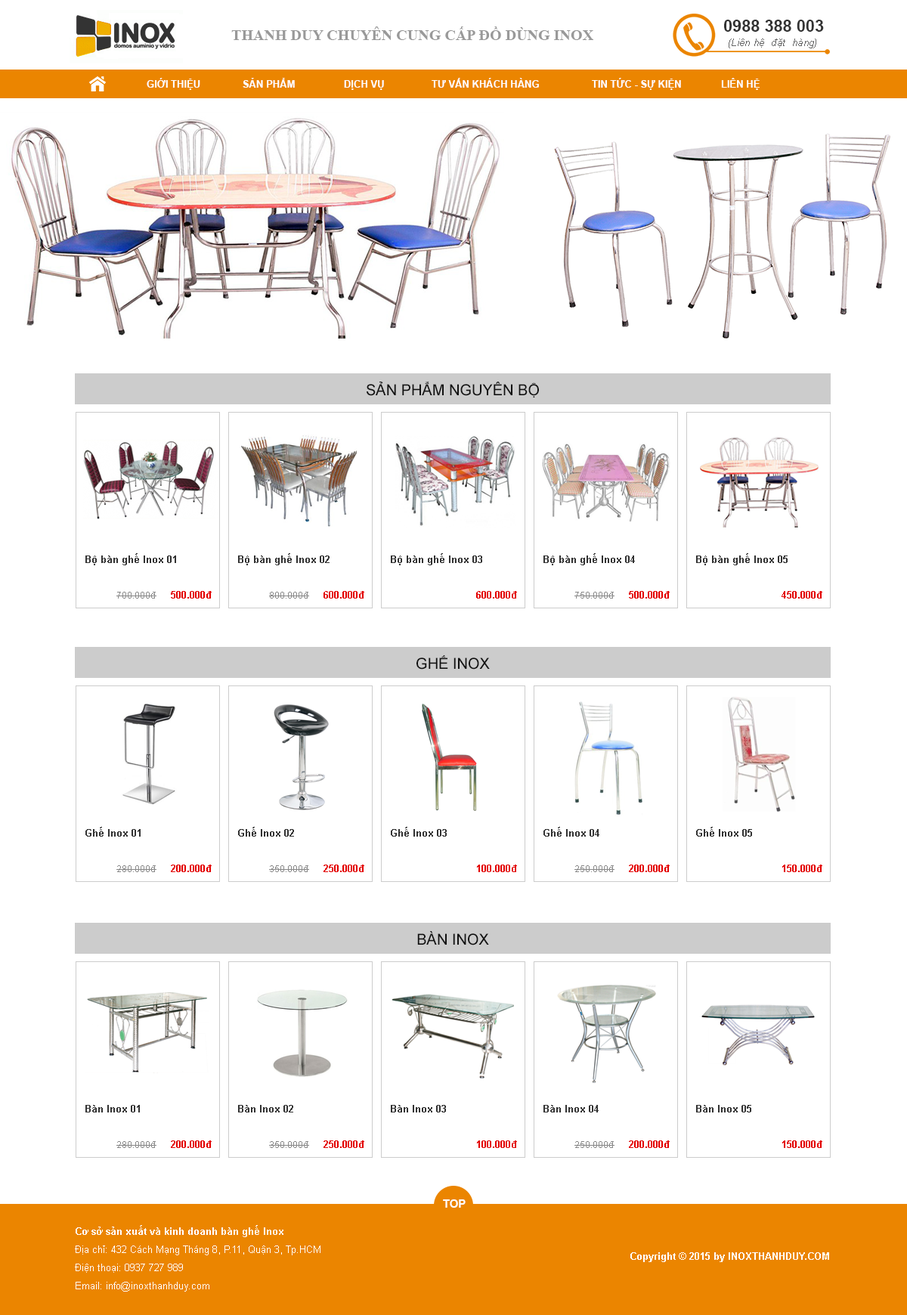
<style>
.page{position:relative;width:907px;height:1315px;background:#ffffff}
.page>*{position:absolute;margin:0}
.t1{font:15.1px "TimesNewRomanPS-BoldMT";color:#999999}
.t2{font:16.5px "Arial-BoldMT";color:#333333}
.t3{font:9.8px "Arial-ItalicMT";letter-spacing:0.025em;color:#666666}
.t4{font:9.9px "Arial-BoldMT";color:#ffffff;text-transform:uppercase}
.t5{font:15.1px "ArialMT";color:#111111;text-transform:uppercase}
.t6{font:9.8px "Arial-BoldMT";color:#333333}
.t7{font:9.1px "ArialMT";color:#888888}
.t8{font:9.8px "Arial-BoldMT";color:#e30000}
.t9{font:11px "Arial-BoldMT";color:#ffffff}
.t10{font:9.8px/18.1px "ArialMT";color:#ffffff}
.t11{font:9.8px/18.1px "Arial-BoldMT";color:#ffffff}
.t12{font:9.8px "Arial-BoldMT";color:#ffffff}
</style>
<div class="page">
<p class="t1" style="left:231px;top:26px;width:362px;height:14px">THANH DUY CHUYÊN CUNG CẤP ĐỒ DÙNG INOX</p>
<p class="t2" style="left:724px;top:20px;width:100px;height:12px">0988 388 003</p>
<p class="t3" style="left:728px;top:39px;width:88px;height:9px">(Liên hệ  đặt  hàng)</p>
<p class="t4" style="left:147px;top:78px;width:53px;height:12px">Giới thiệu</p>
<p class="t4" style="left:243px;top:78px;width:52px;height:10px">Sản phẩm</p>
<p class="t4" style="left:432px;top:78px;width:107px;height:10px">Tư vấn khách hàng</p>
<p class="t4" style="left:592px;top:78px;width:89px;height:12px">Tin tức - sự kiện</p>
<p class="t4" style="left:721px;top:78px;width:38px;height:12px">Liên hệ</p>
<p class="t4" style="left:344px;top:80px;width:40px;height:10px">Dịch vụ</p>
<p class="t5" style="left:367px;top:382px;width:172px;height:16px">sản phẩm nguyên bộ</p>
<p class="t6" style="left:85px;top:553px;width:91px;height:12px">Bộ bàn ghế Inox 01</p>
<p class="t6" style="left:238px;top:553px;width:91px;height:12px">Bộ bàn ghế Inox 02</p>
<p class="t6" style="left:391px;top:553px;width:91px;height:12px">Bộ bàn ghế Inox 03</p>
<p class="t6" style="left:543px;top:553px;width:92px;height:12px">Bộ bàn ghế Inox 04</p>
<p class="t6" style="left:696px;top:553px;width:91px;height:12px">Bộ bàn ghế Inox 05</p>
<p class="t7" style="left:116px;top:592px;width:40px;height:7px">700.000đ</p>
<p class="t8" style="left:171px;top:591px;width:41px;height:8px">500.000đ</p>
<p class="t7" style="left:269px;top:592px;width:40px;height:7px">800.000đ</p>
<p class="t8" style="left:323px;top:591px;width:41px;height:8px">600.000đ</p>
<p class="t8" style="left:476px;top:591px;width:41px;height:8px">600.000đ</p>
<p class="t7" style="left:574px;top:592px;width:40px;height:7px">750.000đ</p>
<p class="t8" style="left:629px;top:591px;width:41px;height:8px">500.000đ</p>
<p class="t8" style="left:781px;top:591px;width:41px;height:8px">450.000đ</p>
<p class="t5" style="left:416px;top:655px;width:74px;height:15px">GHẾ INOX</p>
<p class="t6" style="left:85px;top:827px;width:56px;height:10px">Ghế Inox 01</p>
<p class="t6" style="left:238px;top:827px;width:56px;height:10px">Ghế Inox 02</p>
<p class="t6" style="left:391px;top:827px;width:56px;height:10px">Ghế Inox 03</p>
<p class="t6" style="left:543px;top:827px;width:56px;height:10px">Ghế Inox 04</p>
<p class="t6" style="left:696px;top:827px;width:56px;height:10px">Ghế Inox 05</p>
<p class="t7" style="left:116px;top:865px;width:40px;height:7px">280.000đ</p>
<p class="t8" style="left:171px;top:865px;width:41px;height:7px">200.000đ</p>
<p class="t7" style="left:269px;top:865px;width:40px;height:7px">350.000đ</p>
<p class="t8" style="left:323px;top:865px;width:41px;height:7px">250.000đ</p>
<p class="t8" style="left:477px;top:865px;width:40px;height:7px">100.000đ</p>
<p class="t7" style="left:574px;top:865px;width:40px;height:7px">250.000đ</p>
<p class="t8" style="left:629px;top:865px;width:41px;height:7px">200.000đ</p>
<p class="t8" style="left:782px;top:865px;width:40px;height:7px">150.000đ</p>
<p class="t5" style="left:417px;top:931px;width:72px;height:14px">BÀN INOX</p>
<p class="t6" style="left:85px;top:1105px;width:55px;height:7px">Bàn Inox 01</p>
<p class="t6" style="left:238px;top:1105px;width:55px;height:7px">Bàn Inox 02</p>
<p class="t6" style="left:391px;top:1105px;width:55px;height:7px">Bàn Inox 03</p>
<p class="t6" style="left:543px;top:1105px;width:56px;height:7px">Bàn Inox 04</p>
<p class="t6" style="left:696px;top:1105px;width:55px;height:7px">Bàn Inox 05</p>
<p class="t7" style="left:116px;top:1141px;width:40px;height:7px">280.000đ</p>
<p class="t8" style="left:171px;top:1140px;width:41px;height:8px">200.000đ</p>
<p class="t7" style="left:269px;top:1141px;width:40px;height:7px">350.000đ</p>
<p class="t8" style="left:323px;top:1140px;width:41px;height:8px">250.000đ</p>
<p class="t8" style="left:477px;top:1140px;width:40px;height:8px">100.000đ</p>
<p class="t7" style="left:574px;top:1141px;width:40px;height:7px">250.000đ</p>
<p class="t8" style="left:629px;top:1140px;width:41px;height:8px">200.000đ</p>
<p class="t8" style="left:782px;top:1140px;width:40px;height:8px">150.000đ</p>
<p class="t9" style="left:443px;top:1199px;width:23px;height:9px">TOP</p>
<p class="t10" style="left:75px;top:1225px;width:245px;height:66px"><span class="t11">Cơ sở sản xuất và kinh doanh bàn ghế Inox<br></span>Địa chỉ: 432 Cách Mạng Tháng 8, P.11, Quận 3, Tp.HCM<br>Điện thoại: 0937 727 989<br>Email: info@inoxthanhduy.com</p>
<p class="t12" style="left:630px;top:1252px;width:199px;height:10px">Copyright © 2015 by INOXTHANHDUY.COM</p>
</div>
